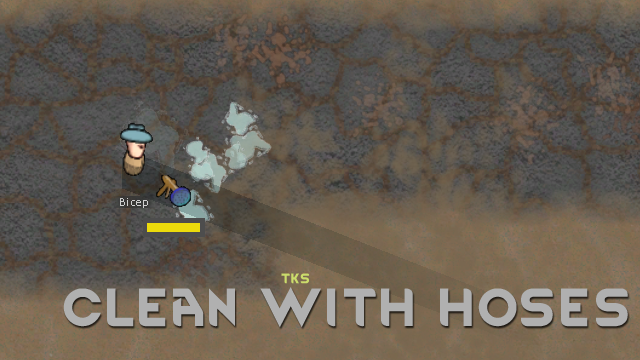
<style>
.page{position:relative;width:640px;height:360px}
.page>*{position:absolute;margin:0}
.t1{font:12px "RimWordFont";color:#cadb6a}
.t2{font:45.8px "RimWordFont";color:#b0b0b0}
</style>
<div class="page">
<p class="t1" style="left:281px;top:273px;width:28px;height:11px">tks</p>
<p class="t2" style="left:63px;top:287px;width:565px;height:41px">Clean With Hoses</p>
</div>
